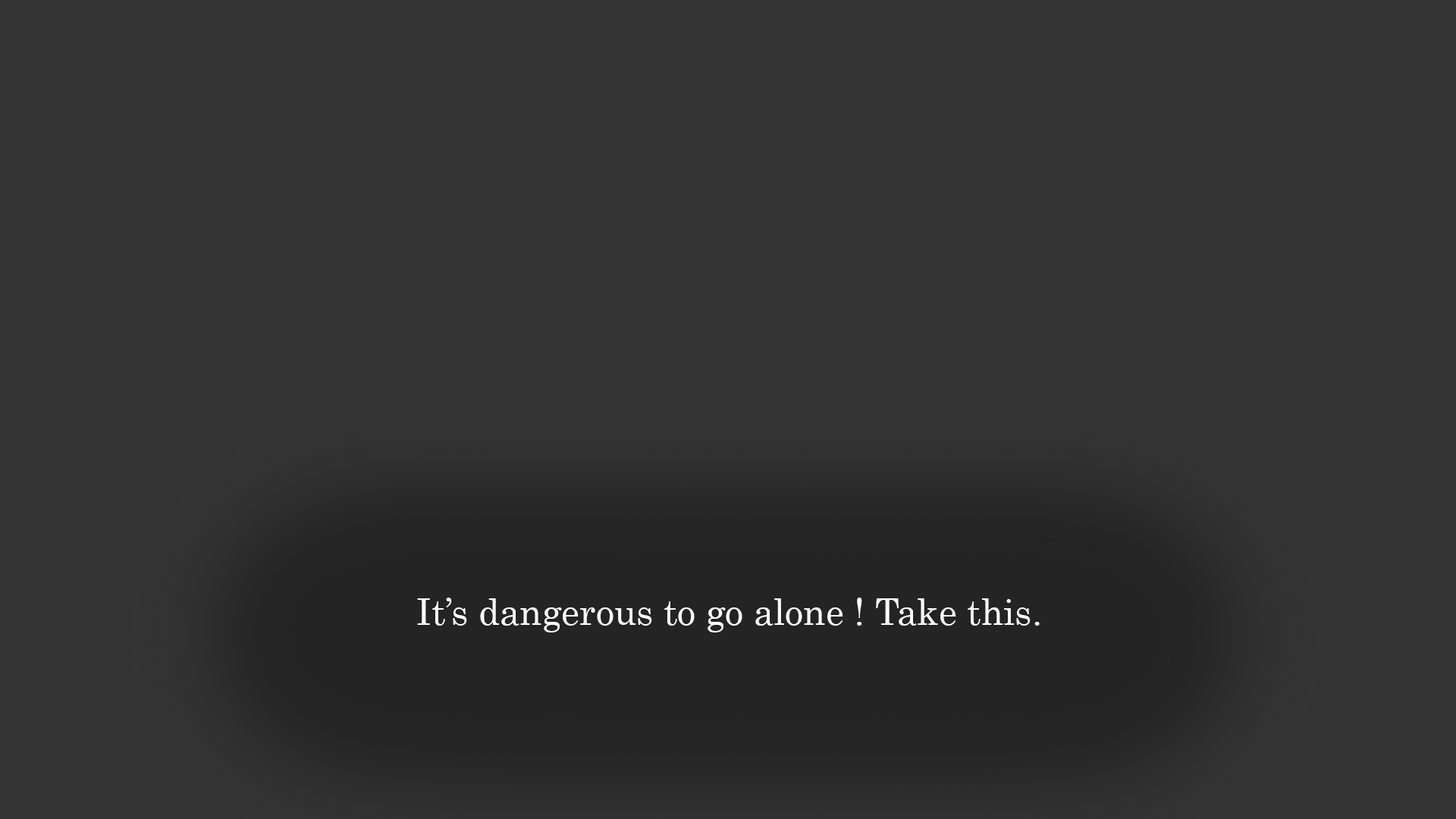
<style>
.page{position:relative;width:1456px;height:819px;background:#333333}
.page>*{position:absolute;margin:0}
.t1{font:36.4px "Century";color:#ffffff}
</style>
<div class="page">
<p class="t1" style="left:417px;top:598px;width:623px;height:34px">It’s dangerous to go alone ! Take this.</p>
</div>
